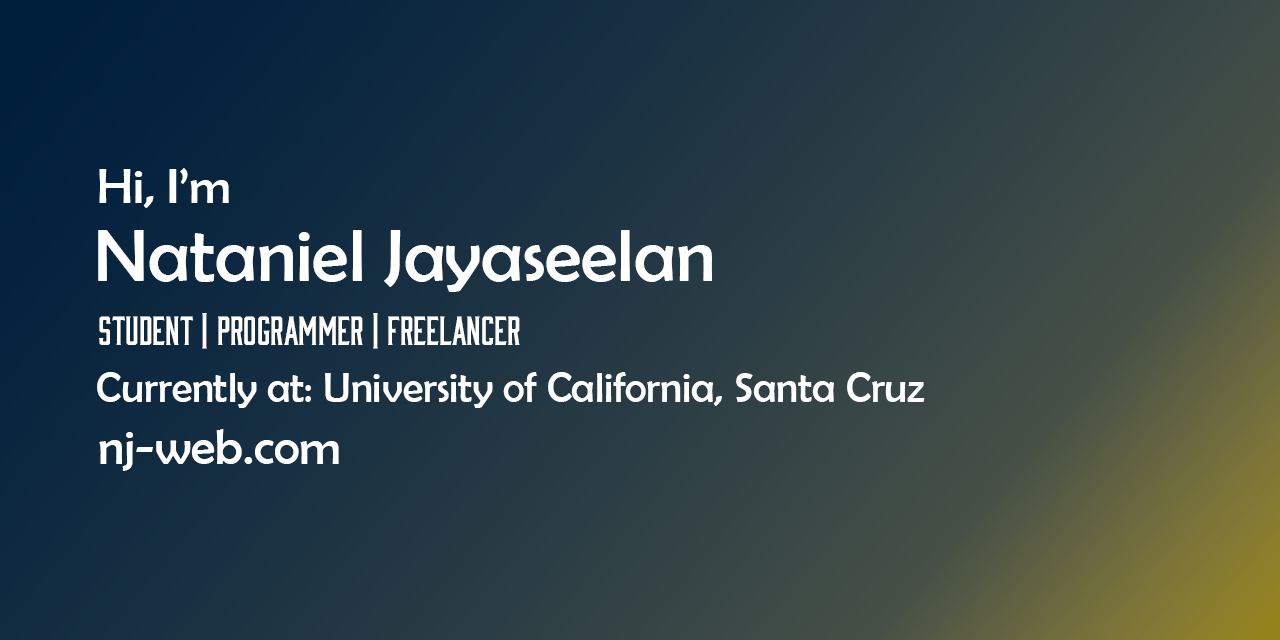
<style>
.page{position:relative;width:1280px;height:640px}
.page>*{position:absolute;margin:0}
.t1{font:50px "BerlinSansFB-Reg";color:#ffffff}
.t2{font:75px "BerlinSansFB-Reg";color:#ffffff}
.t3{font:37.5px "Bourbon-Regular";color:#ffffff}
.t4{font:41.7px "BerlinSansFB-Reg";color:#ffffff}
</style>
<div class="page">
<p class="t1" style="left:99px;top:168px;width:130px;height:40px">Hi, I’m</p>
<p class="t2" style="left:98px;top:230px;width:614px;height:62px">Nataniel Jayaseelan</p>
<p class="t3" style="left:99px;top:313px;width:421px;height:36px">Student | Programmer | Freelancer</p>
<p class="t4" style="left:97px;top:372px;width:828px;height:36px">Currently at: University of California, Santa Cruz</p>
<p class="t1" style="left:99px;top:429px;width:240px;height:42px">nj-web.com</p>
</div>
